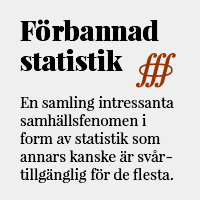
<style>
.page{position:relative;width:200px;height:200px;background:#efefef}
.page>*{position:absolute;margin:0}
.t1{font:15px "PlayfairDisplay-Regular";color:#000000}
.t2{font:27px/30px "PlayfairDisplay-Black";color:#000000}
.t3{font:30px "STIXGeneral-Bold";color:#993300}
</style>
<div class="page">
<p class="t1" style="left:20px;top:19px;width:154px;height:164px"><span class="t2">Förbannad<br>statistik<br></span>En samling intressanta samhällsfenomen i form av statistik som annars kanske är svårtillgänglig för de flesta.</p>
<p class="t3" style="left:135px;top:53px;width:41px;height:35px">∰</p>
</div>
